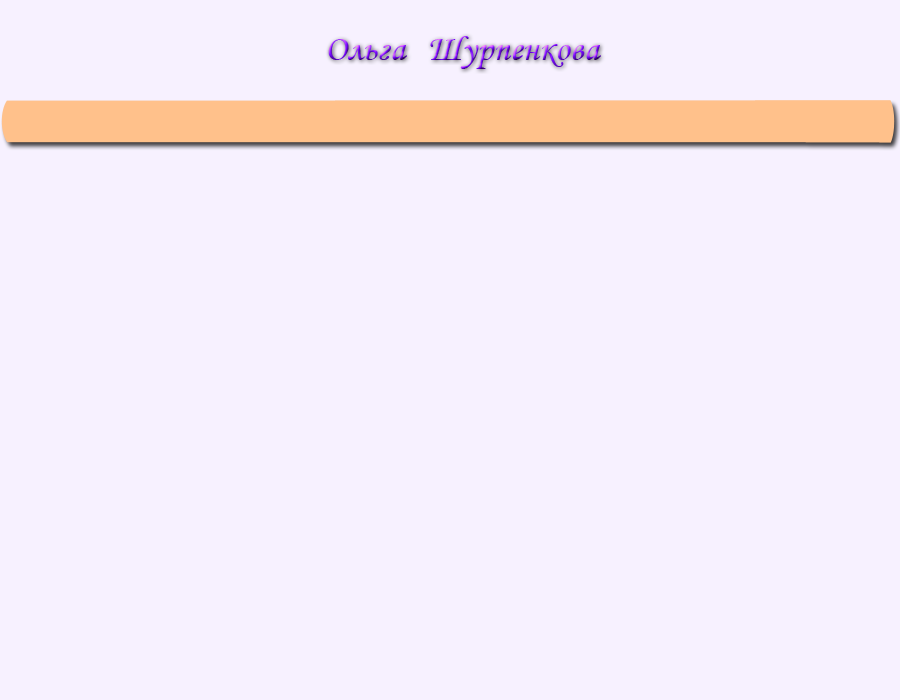
<style>
.page{position:relative;width:900px;height:700px;background:#f7f1ff}
.page>*{position:absolute;margin:0}
.t1{font:36px "MonotypeCorsiva";letter-spacing:0.01em;color:#780bff}
</style>
<div class="page">
<p class="t1" style="left:328px;top:36px;width:273px;height:33px">Ольга Шурпенкова</p>
</div>
